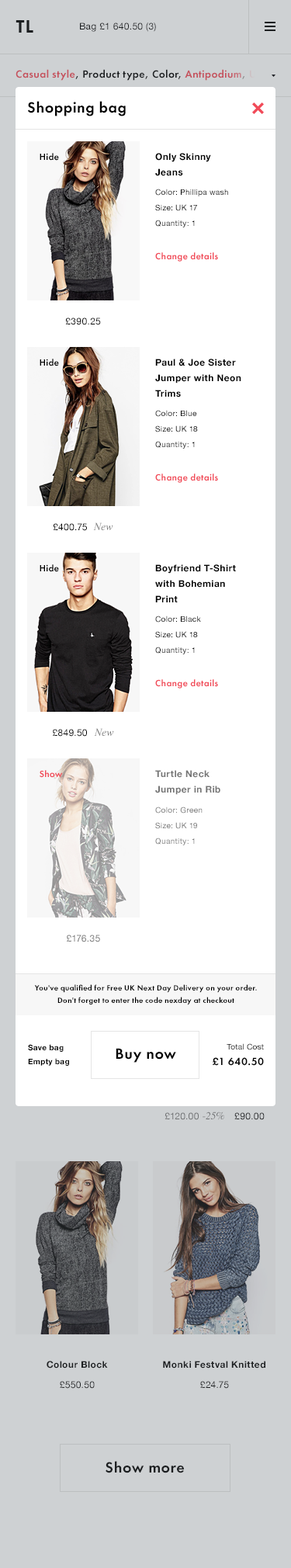
<style>
.page{position:relative;width:291px;height:1568px;background:#ffffff}
.page>*{position:absolute;margin:0}
.t1{font:15.5px "FuturaPT-Demi";letter-spacing:0.03em;color:#000000}
.t2{font:9.3px "FuturaPT-Demi";letter-spacing:0.03em;color:#000000}
.t3{font:9.3px/15.5px "HelveticaNeue-Bold";letter-spacing:0.03em;color:#000000}
.t4{font:7.8px/15.5px "HelveticaNeue";letter-spacing:0.03em;color:#000000}
.t5{font:9.3px "FuturaPT-Demi";letter-spacing:0.03em;color:#f14a58}
.t6{font:9.3px "HelveticaNeue";letter-spacing:0.03em;color:#000000}
.t7{font:10.9px "Times-Italic";color:#757575}
.t8{font:9.3px/15.5px "HelveticaNeue-Bold";letter-spacing:0.03em;color:#757575}
.t9{font:7.8px/15.5px "HelveticaNeue";letter-spacing:0.03em;color:#757575}
.t10{font:9.3px "HelveticaNeue";letter-spacing:0.03em;color:#757575}
.t11{font:7.8px/12.4px "FuturaPT-Demi";letter-spacing:0.03em;color:#000000}
.t12{font:7.8px/14px "HelveticaNeue-Bold";letter-spacing:0.03em;color:#000000}
.t13{font:7.8px "HelveticaNeue";letter-spacing:0.03em;color:#000000}
.t14{font:10.9px "FuturaPT-Demi";letter-spacing:0.03em;color:#000000}
</style>
<div class="page">
<p class="t1" style="left:27px;top:101px;width:99px;height:15px">Shopping bag</p>
<p class="t2" style="left:40px;top:153px;width:19px;height:8px">Hide</p>
<p class="t3" style="left:155px;top:153px;width:56px;height:23px">Only Skinny <br>Jeans</p>
<p class="t4" style="left:155px;top:189px;width:73px;height:38px">Color: Phillipa wash<br>Size: UK 17<br>Quantity: 1</p>
<p class="t5" style="left:155px;top:252px;width:63px;height:10px">Change details</p>
<p class="t6" style="left:65px;top:317px;width:36px;height:8px">£390.25</p>
<p class="t2" style="left:40px;top:359px;width:19px;height:7px">Hide</p>
<p class="t3" style="left:155px;top:359px;width:86px;height:38px">Paul &amp; Joe Sister <br>Jumper with Neon <br>Trims</p>
<p class="t4" style="left:155px;top:410px;width:43px;height:39px">Color: Blue<br>Size: UK 18<br>Quantity: 1</p>
<p class="t5" style="left:155px;top:474px;width:63px;height:9px">Change details</p>
<p class="t6" style="left:53px;top:523px;width:34px;height:8px">£400.75</p>
<p class="t7" style="left:93px;top:522px;width:20px;height:8px">New</p>
<p class="t2" style="left:40px;top:564px;width:19px;height:8px">Hide</p>
<p class="t3" style="left:155px;top:564px;width:81px;height:38px">Boyfriend T-Shirt <br>with Bohemian <br>Print</p>
<p class="t4" style="left:155px;top:616px;width:46px;height:38px">Color: Black<br>Size: UK 18<br>Quantity: 1</p>
<p class="t5" style="left:155px;top:679px;width:63px;height:10px">Change details</p>
<p class="t6" style="left:53px;top:729px;width:34px;height:8px">£849.50</p>
<p class="t7" style="left:94px;top:728px;width:20px;height:8px">New</p>
<p class="t5" style="left:40px;top:770px;width:23px;height:8px">Show</p>
<p class="t8" style="left:155px;top:770px;width:65px;height:25px">Turtle Neck <br>Jumper in Rib</p>
<p class="t9" style="left:155px;top:807px;width:48px;height:38px">Color: Green<br>Size: UK 19<br>Quantity: 1</p>
<p class="t10" style="left:67px;top:935px;width:33px;height:7px">£176.35</p>
<p class="t11" style="left:34px;top:984px;width:223px;height:21px;text-align:center">You've qualified for Free UK Next Day Delivery on your order.<br>Don't forget to enter the code nexday at checkout</p>
<p class="t12" style="left:28px;top:1044px;width:41px;height:22px">Save bag<br>Empty bag</p>
<p class="t1" style="left:116px;top:1048px;width:60px;height:15px">Buy now</p>
<p class="t13" style="left:227px;top:1043px;width:37px;height:7px">Total Cost</p>
<p class="t14" style="left:213px;top:1057px;width:51px;height:9px">£1 640.50</p>
</div>
